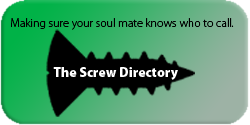
<style>
.page{position:relative;width:250px;height:125px}
.page>*{position:absolute;margin:0}
.t1{font:12px "MyriadPro-Light";color:#000000}
.t2{font:13.6px "MyriadPro-Black";color:#ffffff}
</style>
<div class="page">
<p class="t1" style="left:11px;top:18px;width:223px;height:12px">Making sure your soul mate knows who to call.</p>
<p class="t2" style="left:53px;top:67px;width:125px;height:13px">The Screw Directory</p>
</div>
